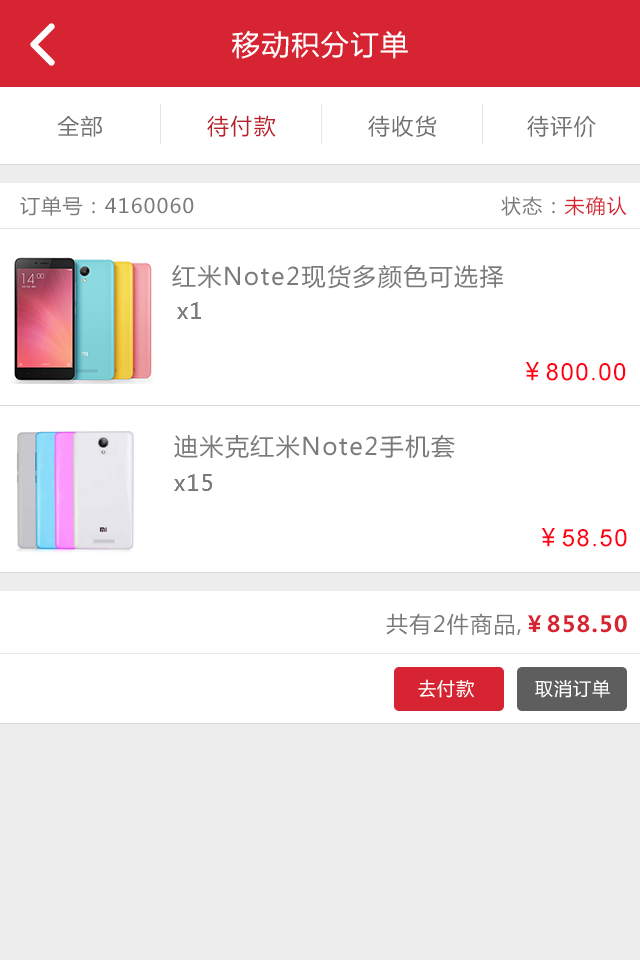
<style>
.page{position:relative;width:640px;height:960px;background:#ffffff}
.page>*{position:absolute;margin:0}
.t1{font:28px "MicrosoftYaHei";letter-spacing:0.06em;color:#ffffff}
.t2{font:22px "MicrosoftYaHei";letter-spacing:0.06em;color:#707171}
.t3{font:22px "MicrosoftYaHei";letter-spacing:0.06em;color:#ba1f2c}
.t4{font:20px "MicrosoftYaHei";letter-spacing:0.06em;color:#7a7a7a}
.t5{font:20px "MicrosoftYaHei";letter-spacing:0.06em;color:#d62432}
.t6{font:24px "MicrosoftYaHei";letter-spacing:0.06em;color:#7a7a7a}
.t7{font:22px "MicrosoftYaHei";letter-spacing:0.06em;color:#7a7a7a}
.t8{font:24px "ArialMT";letter-spacing:0.06em;color:#ff0014}
.t9{font:24px "MicrosoftYaHei";letter-spacing:0.06em;color:#ff0014}
.t10{font:22px "MicrosoftYaHei-Bold";letter-spacing:0.06em;color:#d62432}
.t11{font:18px "MicrosoftYaHei";letter-spacing:0.06em;color:#ffffff}
</style>
<div class="page">
<p class="t1" style="left:232px;top:30px;width:176px;height:29px">移动积分订单</p>
<p class="t2" style="left:57px;top:115px;width:45px;height:22px">全部</p>
<p class="t3" style="left:207px;top:115px;width:69px;height:22px">待付款</p>
<p class="t2" style="left:368px;top:115px;width:69px;height:22px">待收货</p>
<p class="t2" style="left:527px;top:115px;width:69px;height:23px">待评价</p>
<p class="t4" style="left:20px;top:196px;width:174px;height:20px">订单号：4160060</p>
<p class="t4" style="left:501px;top:196px;width:126px;height:20px">状态：<span class="t5">未确认</span></p>
<p class="t6" style="left:172px;top:264px;width:331px;height:25px">红米Note2现货多颜色可选择</p>
<p class="t7" style="left:177px;top:302px;width:24px;height:17px">x1</p>
<p class="t8" style="left:525px;top:362px;width:101px;height:19px"><span class="t9">￥</span>800.00</p>
<p class="t6" style="left:174px;top:435px;width:281px;height:24px">迪米克红米Note2手机套</p>
<p class="t7" style="left:174px;top:474px;width:38px;height:17px">x15</p>
<p class="t8" style="left:541px;top:528px;width:86px;height:19px"><span class="t9">￥</span>58.50</p>
<p class="t7" style="left:386px;top:613px;width:241px;height:22px">共有2件商品,<span class="t10">￥858.50</span></p>
<p class="t11" style="left:418px;top:679px;width:56px;height:19px">去付款</p>
<p class="t11" style="left:535px;top:680px;width:75px;height:18px">取消订单</p>
</div>
